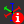
<style>
.page{position:relative;width:24px;height:24px;background:#333333}
.page>*{position:absolute;margin:0}
.t1{font:11.6px "AmericanTypewriter-Bold";color:#ffffff}
</style>
<div class="page">
<p class="t1" style="left:15px;top:13px;width:5px;height:9px">i</p>
</div>
